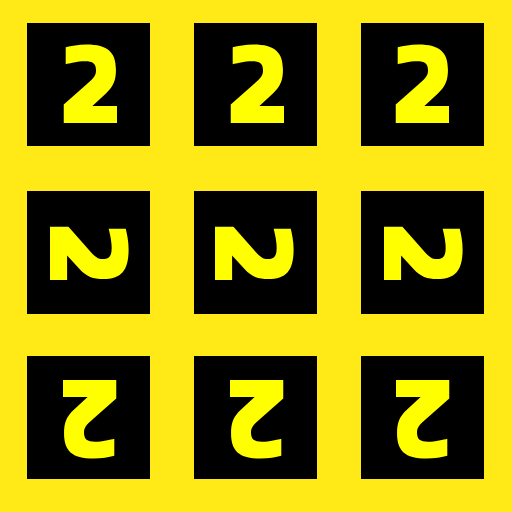
<style>
.page{position:relative;width:512px;height:512px;background:#ffea17}
.page>*{position:absolute;margin:0}
.t1{font:150px "Share-BoldOSF";color:#ffff00}
</style>
<div class="page">
<p class="t1" style="left:63px;top:44px;width:54px;height:79px">2</p>
<p class="t1" style="left:230px;top:44px;width:54px;height:79px">2</p>
<p class="t1" style="left:395px;top:44px;width:54px;height:79px">2</p>
<p class="t1" style="left:50px;top:226px;width:79px;height:55px;rotate:90deg">2</p>
<p class="t1" style="left:215px;top:226px;width:79px;height:55px;rotate:90deg">2</p>
<p class="t1" style="left:384px;top:226px;width:79px;height:55px;rotate:90deg">2</p>
<p class="t1" style="left:63px;top:379px;width:54px;height:80px;rotate:-180deg">2</p>
<p class="t1" style="left:230px;top:379px;width:54px;height:80px;rotate:-180deg">2</p>
<p class="t1" style="left:396px;top:379px;width:54px;height:80px;rotate:-180deg">2</p>
</div>
